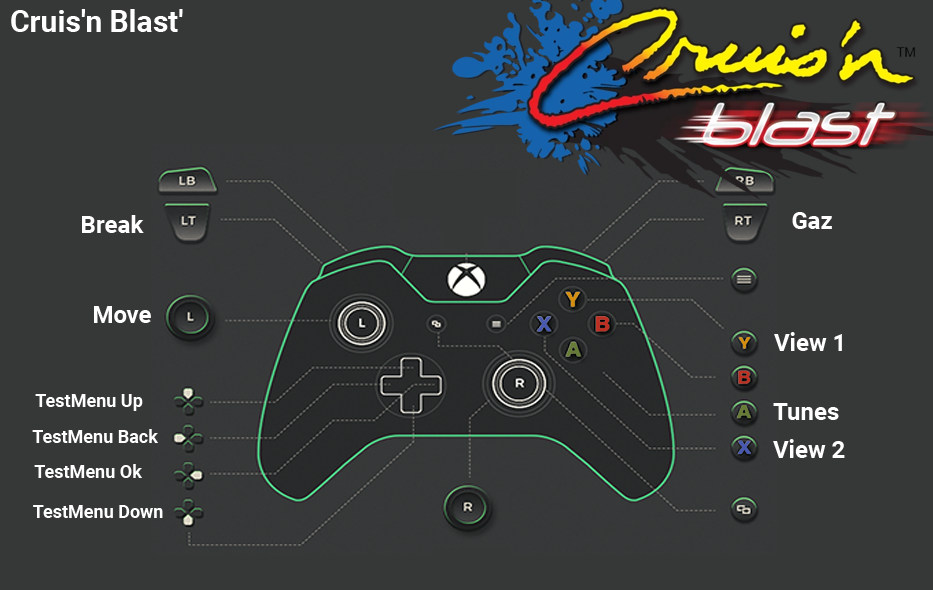
<style>
.page{position:relative;width:933px;height:590px;background:#363838}
.page>*{position:absolute;margin:0}
.t1{font:30px "Roboto-Bold";color:#ffffff}
.t2{font:24px "Roboto-Bold";color:#ffffff}
.t3{font:18px "Roboto-Bold";color:#ffffff}
</style>
<div class="page">
<p class="t1" style="left:11px;top:9px;width:172px;height:23px">Cruis'n Blast'</p>
<p class="t2" style="left:82px;top:215px;width:62px;height:18px">Break</p>
<p class="t2" style="left:792px;top:212px;width:40px;height:17px">Gaz</p>
<p class="t2" style="left:94px;top:306px;width:57px;height:17px">Move</p>
<p class="t2" style="left:774px;top:332px;width:68px;height:19px">View 1</p>
<p class="t3" style="left:35px;top:394px;width:108px;height:17px">TestMenu Up</p>
<p class="t2" style="left:773px;top:403px;width:66px;height:17px">Tunes</p>
<p class="t3" style="left:32px;top:429px;width:126px;height:14px">TestMenu Back</p>
<p class="t2" style="left:773px;top:439px;width:72px;height:19px">View 2</p>
<p class="t3" style="left:34px;top:464px;width:108px;height:14px">TestMenu Ok</p>
<p class="t3" style="left:33px;top:505px;width:130px;height:13px">TestMenu Down</p>
</div>
